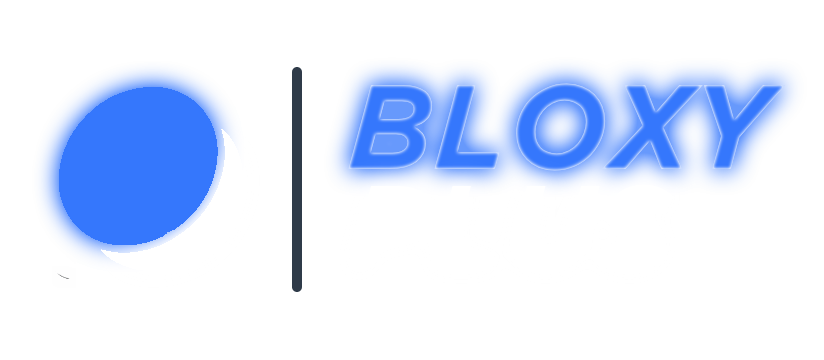
<style>
.page{position:relative;width:824px;height:360px;background:#ffffff}
.page>*{position:absolute;margin:0}
.t1{font:120px "Gotham-BoldItalic";color:#3577fc}
</style>
<div class="page">
<p class="t1" style="left:348px;top:83px;width:438px;height:88px">BLOXY</p>
</div>
